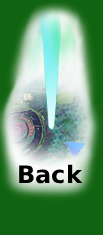
<style>
.page{position:relative;width:103px;height:235px;background:#106310}
.page>*{position:absolute;margin:0}
.t1{font:24px "DejaVuSans-Bold";color:#000000}
</style>
<div class="page">
<p class="t1" style="left:19px;top:164px;width:64px;height:20px">Back</p>
</div>
